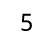
<style>
.page{position:relative;width:53px;height:41px;background:#ffffff}
.page>*{position:absolute;margin:0}
.t1{font:23.7px "DroidSans";color:#000000}
</style>
<div class="page">
<p class="t1" style="left:21px;top:13px;width:11px;height:18px">5</p>
</div>
